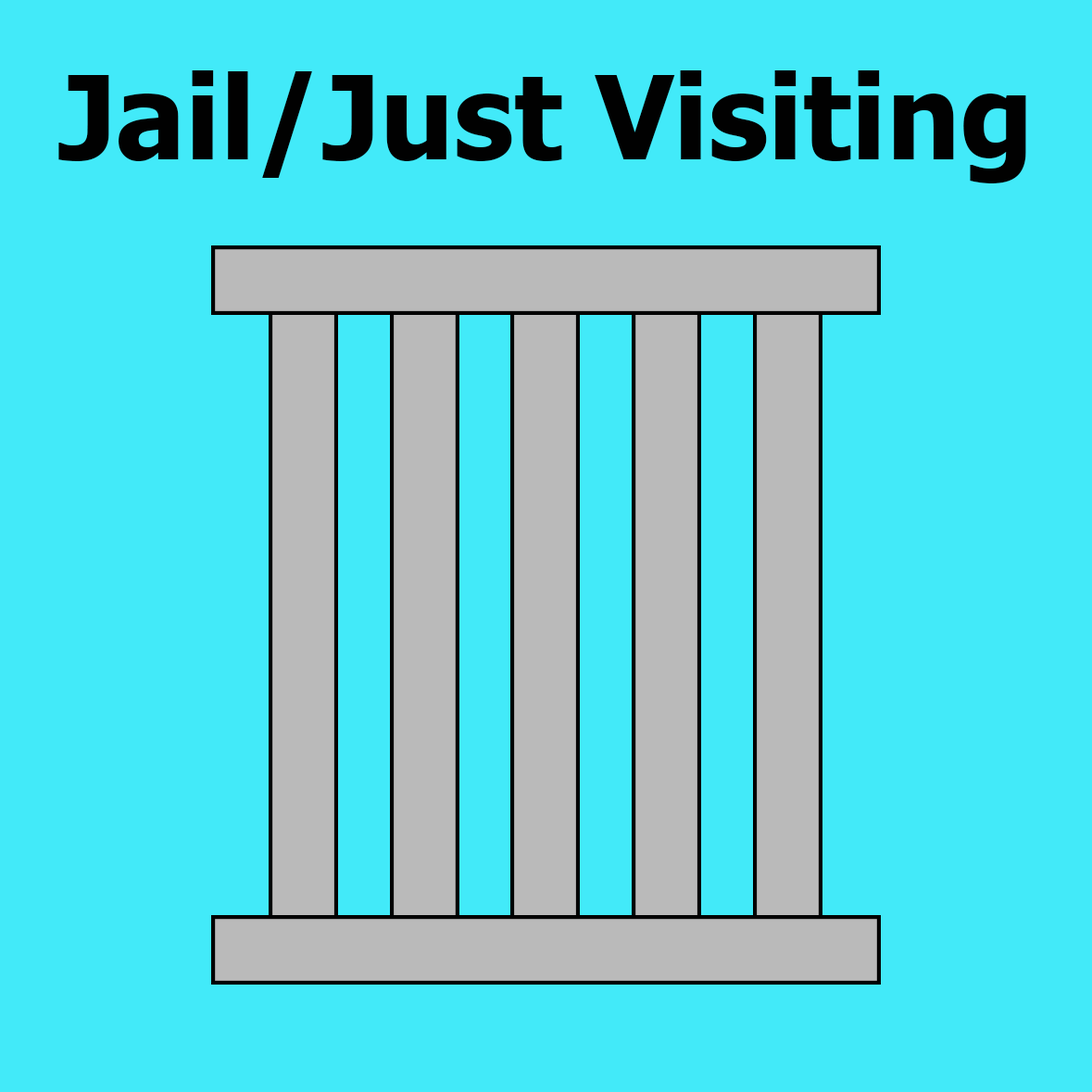
<style>
.page{position:relative;width:1092px;height:1092px;background:#42eaf9}
.page>*{position:absolute;margin:0}
.t1{font:115.8px "Tahoma-Bold";color:#010101}
</style>
<div class="page">
<p class="t1" style="left:58px;top:70px;width:968px;height:113px">Jail/Just Visiting</p>
</div>
